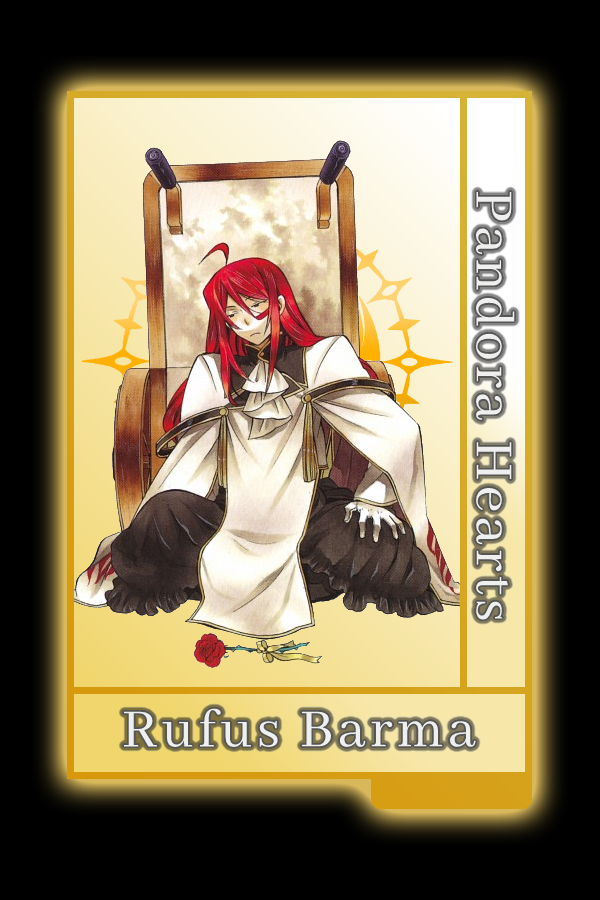
<style>
.page{position:relative;width:600px;height:900px;background:#000000}
.page>*{position:absolute;margin:0}
.t1{font:59.1px "AbhayaLibre-Regular";letter-spacing:0.072em;color:#efefef}
.t2{font:59px "AbhayaLibre-Regular";letter-spacing:0.072em;color:#efefef}
</style>
<div class="page">
<p class="t1" style="left:476px;top:192px;width:39px;height:428px;rotate:90deg">Pandora Hearts</p>
<p class="t2" style="left:124px;top:708px;width:352px;height:39px">Rufus Barma</p>
</div>
